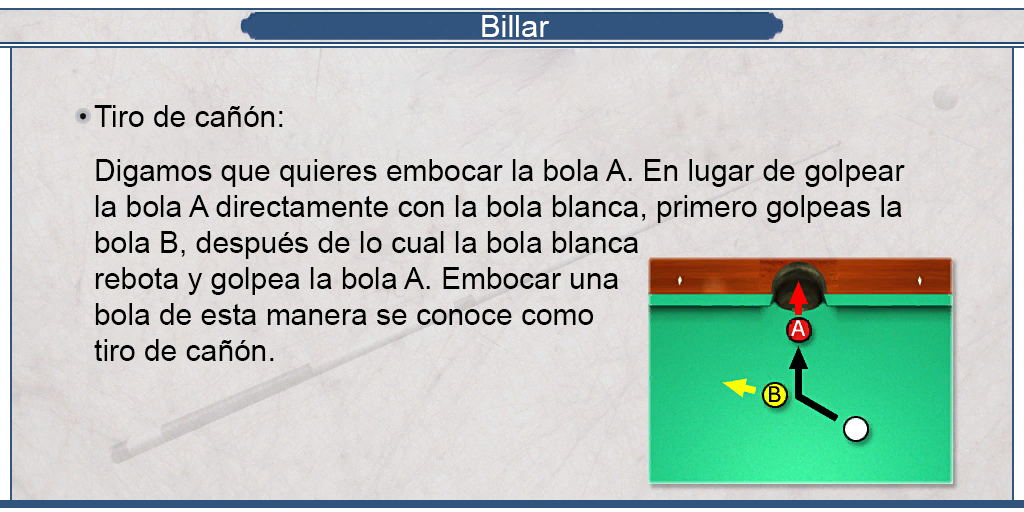
<style>
.page{position:relative;width:1024px;height:512px}
.page>*{position:absolute;margin:0}
.t1{font:30.8px "ArialMT";color:#ffffff}
.t2{font:30px "ArialMT";color:#000000}
</style>
<div class="page">
<p class="t1" style="left:482px;top:15px;width:68px;height:22px">Billar</p>
<p class="t2" style="left:94px;top:105px;width:811px;height:256px;text-align:justify">Tiro de cañón:<br><br>Digamos que quieres embocar la bola A. En lugar de golpear<br>la bola A directamente con la bola blanca, primero golpeas la<br>bola B, después de lo cual la bola blanca<br>rebota y golpea la bola A. Embocar una<br>bola de esta manera se conoce como<br>tiro de cañón.</p>
</div>
